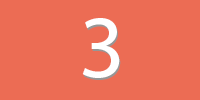
<style>
.page{position:relative;width:200px;height:100px;background:#ec6c54}
.page>*{position:absolute;margin:0}
.t1{font:89.8px "MyriadPro-Regular";color:#ffffff}
</style>
<div class="page">
<p class="t1" style="left:82px;top:18px;width:38px;height:60px">3</p>
<p class="t1" style="left:83px;top:20px;width:38px;height:60px">3</p>
</div>
